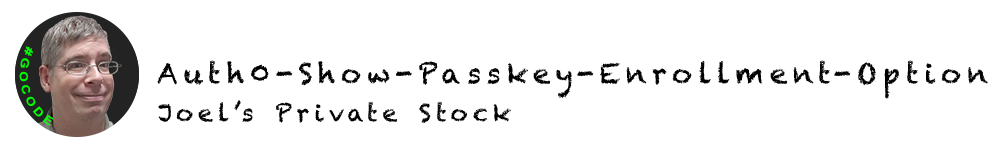
<style>
.page{position:relative;width:1000px;height:150px;background:#ffffff}
.page>*{position:absolute;margin:0}
.t1{font:11.2px "Arial-BoldMT";letter-spacing:0.2em;color:#00ff00}
.t2{font:28px "Chalkduster";letter-spacing:0.2em;color:#000000}
.t3{font:24px "Chalkduster";letter-spacing:0.2em;color:#000000}
</style>
<div class="page">
<p class="t1" style="left:19px;top:46px;width:35px;height:80px;rotate:72deg">#GOCODE</p>
<p class="t2" style="left:157px;top:60px;width:831px;height:39px">Auth0-Show-Passkey-Enrollment-Option</p>
<p class="t3" style="left:158px;top:100px;width:353px;height:23px">Joel’s Private Stock</p>
</div>
